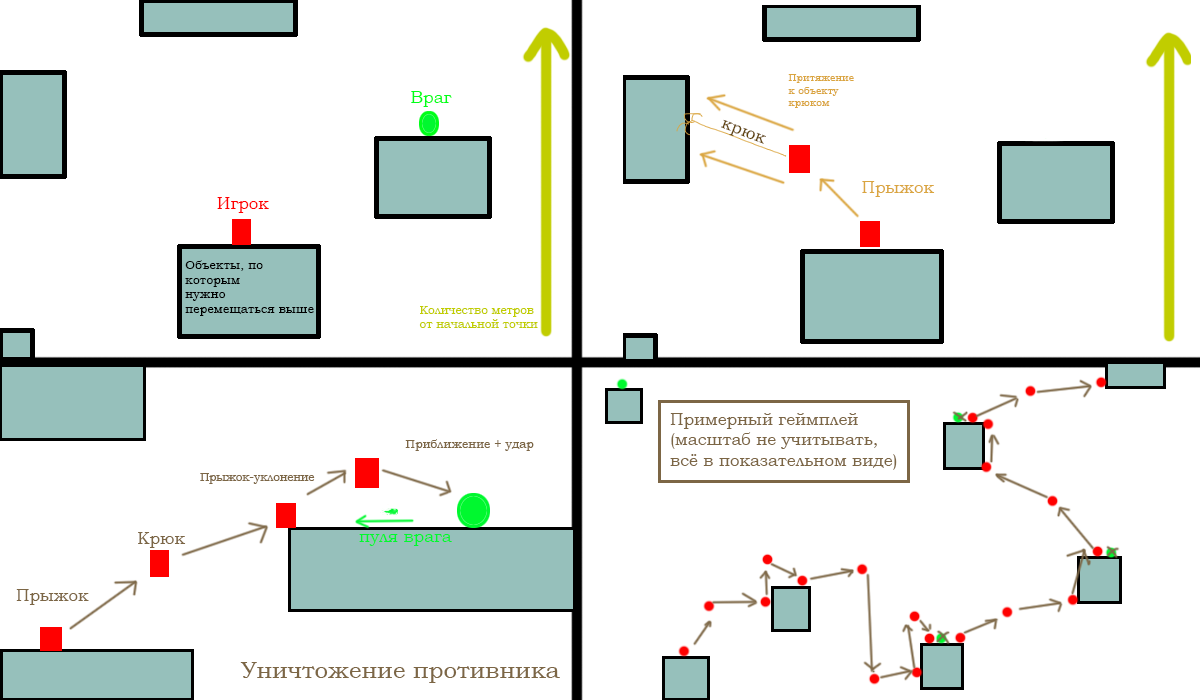
<style>
.page{position:relative;width:1200px;height:700px;background:#ffffff}
.page>*{position:absolute;margin:0}
.t1{font:10.3px "BookmanOldStyle";color:#daa53f}
.t2{font:17px "BookmanOldStyle";color:#00ff18}
.t3{font:17px "BookmanOldStyle";color:#61430a}
.t4{font:17px "BookmanOldStyle";color:#daa53f}
.t5{font:17px "BookmanOldStyle";color:#ff0000}
.t6{font:12.4px "BookmanOldStyle";color:#000000}
.t7{font:11.8px "BookmanOldStyle";color:#c1cd00}
.t8{font:17px "BookmanOldStyle";color:#7c6645}
.t9{font:12.1px "BookmanOldStyle";color:#7c6645}
.t10{font:11.5px "BookmanOldStyle";color:#7c6645}
.t11{font:17px "BookmanOldStyle";color:#00f82f}
.t12{font:24px "BookmanOldStyle";color:#7c6645}
</style>
<div class="page">
<p class="t1" style="left:788px;top:74px;width:66px;height:34px">Притяжение<br>к объекту <br>крюком</p>
<p class="t2" style="left:411px;top:91px;width:41px;height:16px">Враг</p>
<p class="t3" style="left:721px;top:119px;width:45px;height:25px;rotate:21deg">крюк</p>
<p class="t4" style="left:862px;top:181px;width:73px;height:16px">Прыжок</p>
<p class="t5" style="left:217px;top:197px;width:52px;height:16px">Игрок</p>
<p class="t6" style="left:185px;top:260px;width:129px;height:56px">Объекты, по <br>которым<br>нужно <br>перемещаться выше</p>
<p class="t7" style="left:419px;top:306px;width:119px;height:22px">Количество метров<br>от начальной точки</p>
<p class="t8" style="left:670px;top:413px;width:227px;height:57px">Примерный геймплей<br>(масштаб не учитывать,<br>всё в показательном виде)</p>
<p class="t9" style="left:405px;top:439px;width:129px;height:12px">Приближение + удар</p>
<p class="t10" style="left:200px;top:473px;width:115px;height:11px">Прыжок-уклонение</p>
<p class="t8" style="left:138px;top:532px;width:48px;height:16px">Крюк</p>
<p class="t11" style="left:359px;top:534px;width:93px;height:12px">пуля врага</p>
<p class="t8" style="left:16px;top:589px;width:73px;height:16px">Прыжок</p>
<p class="t12" style="left:240px;top:662px;width:320px;height:21px">Уничтожение противника</p>
</div>
